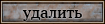
<style>
.page{position:relative;width:105px;height:24px}
.page>*{position:absolute;margin:0}
.t1{font:15px "CooperMediumCBT";color:#000000}
</style>
<div class="page">
<p class="t1" style="left:22px;top:10px;width:60px;height:11px">удалить</p>
</div>
